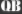
<style>
.page{position:relative;width:22px;height:14px}
.page>*{position:absolute;margin:0}
.t1{font:14px "StencilStd";letter-spacing:0.01em;color:#ffffff}
</style>
<div class="page">
<p class="t1" style="left:1px;top:0px;width:20px;height:12px">QB</p>
</div>
